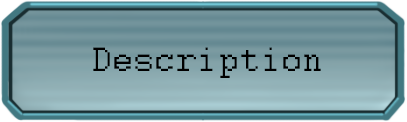
<style>
.page{position:relative;width:407px;height:122px}
.page>*{position:absolute;margin:0}
.t1{font:37.5px "Courier";color:#000000}
</style>
<div class="page">
<p class="t1" style="left:93px;top:47px;width:228px;height:31px">Description</p>
</div>
